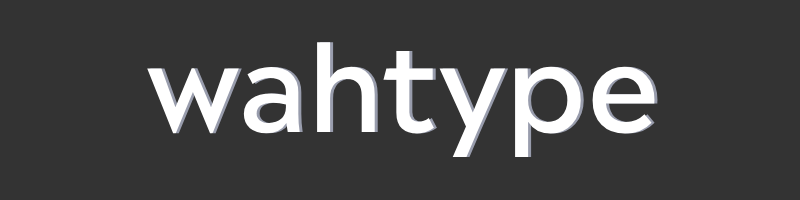
<style>
.page{position:relative;width:800px;height:200px;background:#333333}
.page>*{position:absolute;margin:0}
.t1{font:121.6px "MaderaW01-Medium";color:#ffffff}
</style>
<div class="page">
<p class="t1" style="left:147px;top:42px;width:508px;height:116px">wahtype</p>
</div>
